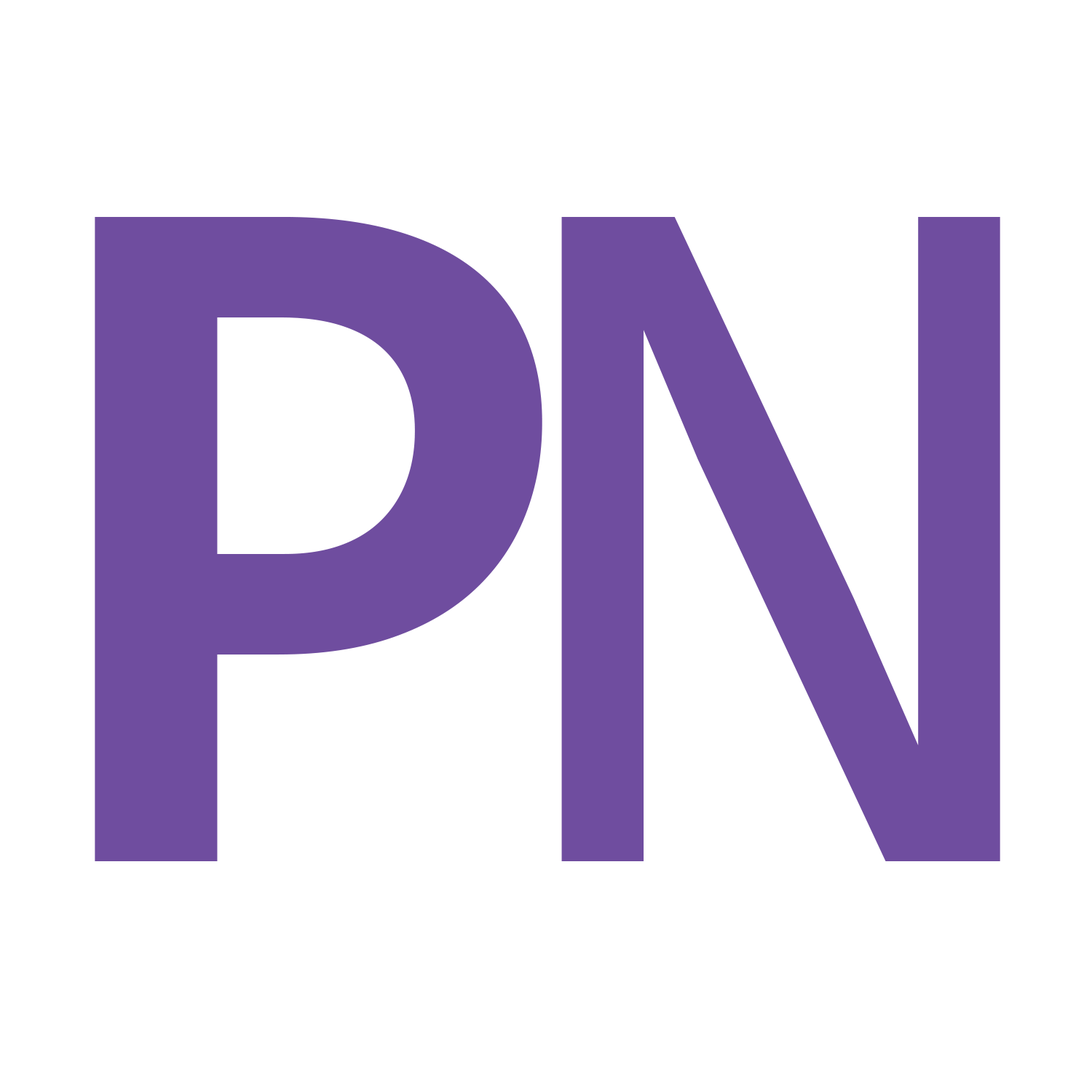
<style>
.page{position:relative;width:1092px;height:1092px;background:#ffffff}
.page>*{position:absolute;margin:0}
.t1{font:1010px "Consolas-Bold";color:#6f4d9f}
.t2{font:1010px "Consolas";color:#6f4d9f}
</style>
<div class="page">
<p class="t1" style="left:95px;top:217px;width:905px;height:644px">P<span class="t2">N</span></p>
</div>
